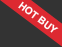
<style>
.page{position:relative;width:62px;height:47px;background:#333333}
.page>*{position:absolute;margin:0}
.t1{font:10px "Arial-BoldMT";color:#fefdfd}
</style>
<div class="page">
<p class="t1" style="left:18px;top:1px;width:41px;height:32px;rotate:37deg">HOT BUY</p>
</div>
